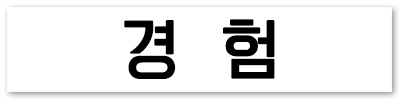
<style>
.page{position:relative;width:400px;height:100px;background:#ffffff}
.page>*{position:absolute;margin:0}
.t1{font:60px "KoreanYNSJG3-R";color:#000000;font-weight:bold}
</style>
<div class="page">
<p class="t1" style="left:124px;top:19px;width:151px;height:60px">경  험</p>
</div>
